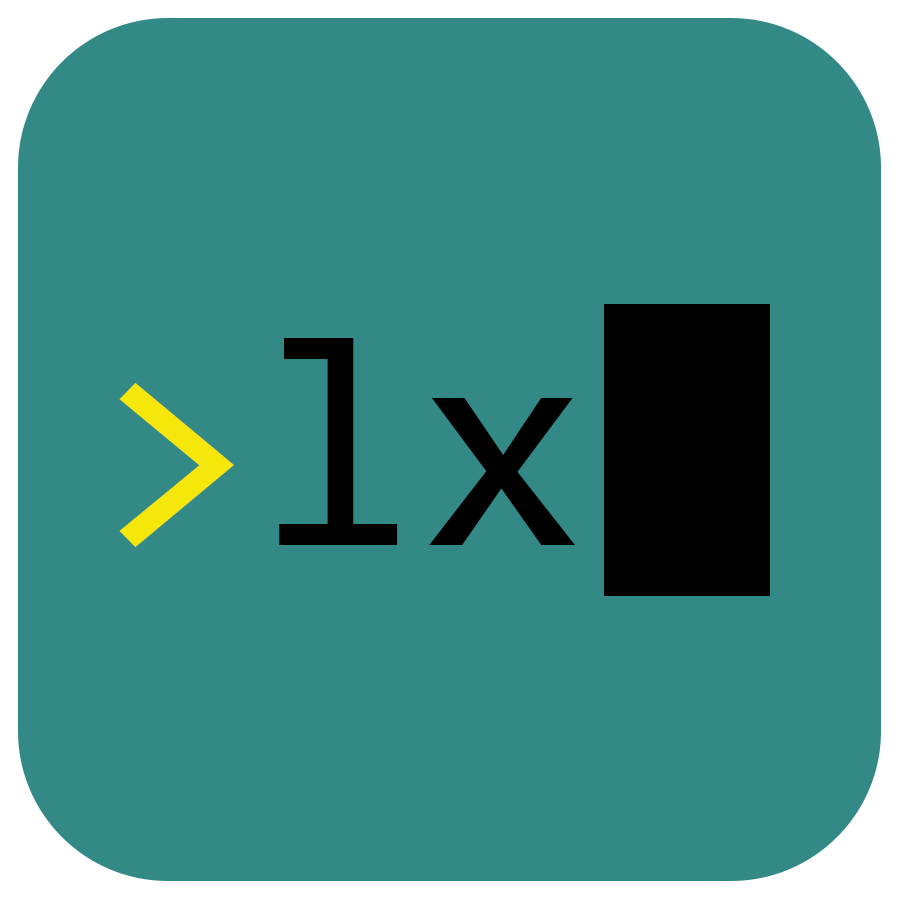
<style>
.page{position:relative;width:900px;height:900px;background:#338986}
.page>*{position:absolute;margin:0}
.t1{font:300px "Consolas";color:#000000}
.t2{font:300px "Consolas";color:#f5e709}
</style>
<div class="page">
<p class="t1" style="left:119px;top:338px;width:456px;height:209px"><span class="t2">&gt;</span>lx</p>
</div>
